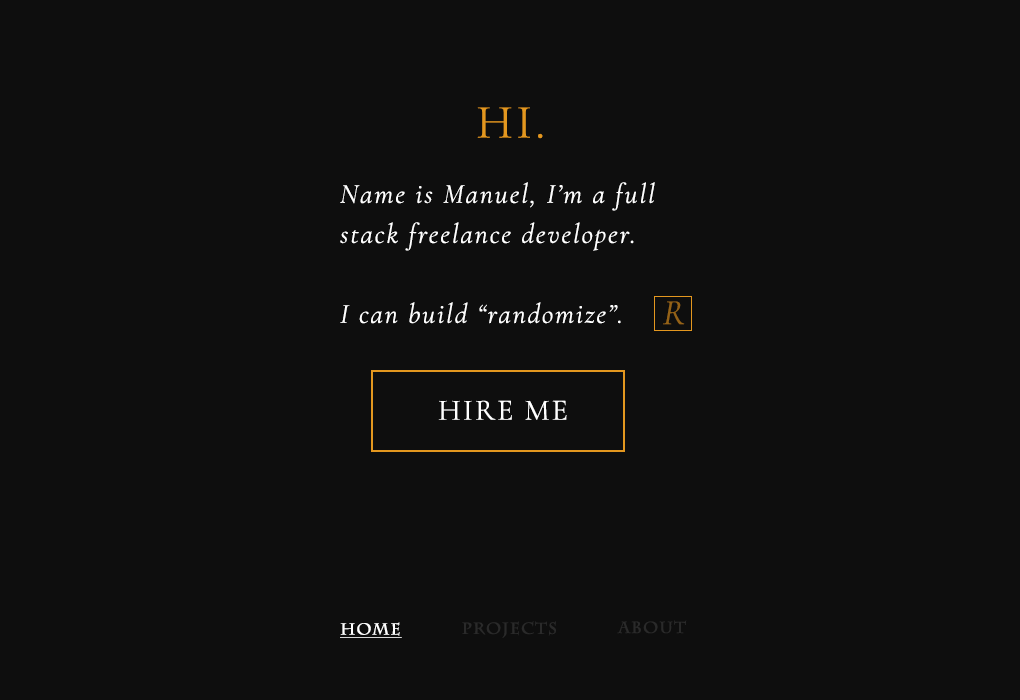
<style>
.page{position:relative;width:1020px;height:700px;background:#0e0e0e}
.page>*{position:absolute;margin:0}
.t1{font:48px "CormorantGaramond-Regular";letter-spacing:0.07em;color:#e3971f}
.t2{font:28px/40px "CormorantGaramond-Italic";letter-spacing:0.07em;color:#ffffff}
.t3{font:36px "CormorantGaramond-Italic";letter-spacing:0.07em;color:#946217}
.t4{font:30px "CormorantGaramond-Regular";letter-spacing:0.07em;color:#ffffff}
.t5{font:16px "CharlemagneStd-Bold";letter-spacing:0.07em;color:#ffffff;text-decoration:underline}
.t6{font:16px "CharlemagneStd-Bold";letter-spacing:0.07em;color:#2a2a2a}
</style>
<div class="page">
<p class="t1" style="left:477px;top:107px;width:66px;height:32px">HI.</p>
<p class="t2" style="left:340px;top:182px;width:315px;height:142px">Name is Manuel, I’m a full stack freelance developer. <br><br>I can build “randomize”.</p>
<p class="t3" style="left:663px;top:301px;width:22px;height:24px">R</p>
<p class="t4" style="left:438px;top:400px;width:129px;height:20px">HIRE ME</p>
<p class="t5" style="left:340px;top:622px;width:62px;height:16px">Home</p>
<p class="t6" style="left:462px;top:621px;width:94px;height:17px">Projects</p>
<p class="t6" style="left:617px;top:620px;width:70px;height:14px">About</p>
</div>
